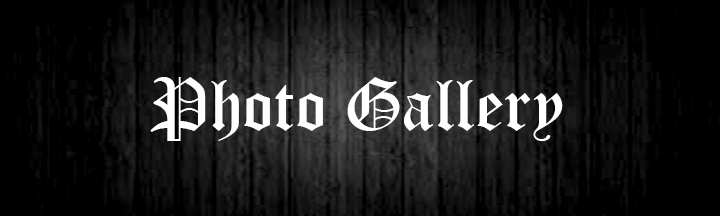
<style>
.page{position:relative;width:720px;height:216px;background:#000000}
.page>*{position:absolute;margin:0}
.t1{font:72px "OldEnglishTextMT";color:#ffffff}
</style>
<div class="page">
<p class="t1" style="left:150px;top:77px;width:413px;height:64px">Photo Gallery</p>
</div>
